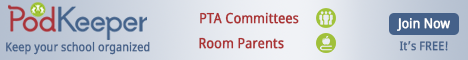
<style>
.page{position:relative;width:468px;height:60px}
.page>*{position:absolute;margin:0}
.t1{font:14px "NotoSans";color:#ab3334;font-weight:bold;scale:0.88 1}
.t2{font:13.5px "NotoSans";color:#ffffff;font-weight:bold;scale:0.88 1}
.t3{font:12px "NotoSans";color:#456189;font-weight:bold;scale:0.88 1}
</style>
<div class="page">
<p class="t1" style="left:200px;top:12px;width:99px;height:12px">PTA Committees</p>
<p class="t2" style="left:397px;top:18px;width:53px;height:13px">Join Now</p>
<p class="t3" style="left:6px;top:41px;width:144px;height:14px">Keep your school organized</p>
<p class="t1" style="left:199px;top:37px;width:85px;height:12px">Room Parents</p>
<p class="t3" style="left:399px;top:41px;width:49px;height:10px">It’s FREE!</p>
</div>
